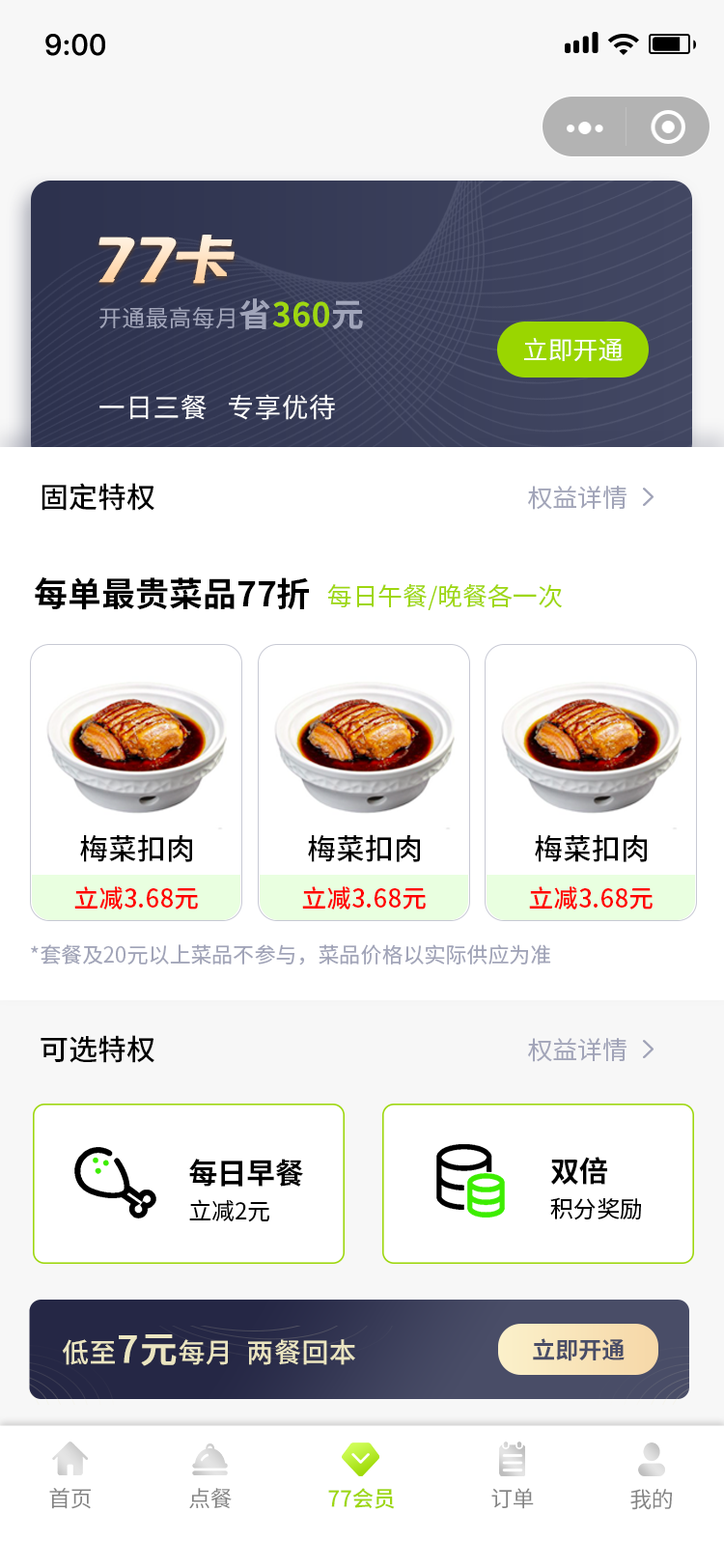
<style>
.page{position:relative;width:724px;height:1568px;background:#ffffff}
.page>*{position:absolute;margin:0}
.t1{font:29px "PingFang-SC-Bold";letter-spacing:0.02em;color:#000000}
.t2{font:59.9px "zihun54hao-xianhei";letter-spacing:-0.02em;font-style:italic}
.t3{font:23.2px "SourceHanSansCN-Regular";letter-spacing:0.02em;color:#a1a5ba}
.t4{font:32.8px "SourceHanSansCN-Bold";letter-spacing:0.02em;color:#a1a5ba}
.t5{font:32.8px "SourceHanSansCN-Bold";letter-spacing:0.02em;color:#9ed710}
.t6{font:25.1px "SourceHanSansCN-Regular";color:#ffffff}
.t7{font:27px "SourceHanSansCN-Regular";letter-spacing:0.02em;color:#ffffff}
.t8{font:29px "SourceHanSansCN-Medium";color:#000000}
.t9{font:25.1px "SourceHanSansCN-Regular";color:#a1a4b8}
.t10{font:33.8px "SourceHanSansCN-Bold";color:#000000}
.t11{font:25.1px "SourceHanSansCN-Regular";color:#9ed710}
.t12{font:25.1px "SourceHanSansCN-Medium";color:#ff0000}
.t13{font:21.2px "SourceHanSansCN-Regular";color:#a1a4b8}
.t14{font:29px "SourceHanSansCN-Bold";color:#000000}
.t15{font:23.2px "SourceHanSansCN-Regular";color:#000000}
.t16{font:27px "SourceHanSansCN-Medium";letter-spacing:0.02em;color:#ebe5c1}
.t17{font:36.7px "SourceHanSansCN-Medium";letter-spacing:0.02em;color:#ebe5c1;font-weight:bold}
.t18{font:23.2px "SourceHanSansCN-Bold";color:#494d67}
.t19{font:22.2px "SourceHanSansCN-Regular";letter-spacing:-0.02em;color:#838383}
.t20{font:22.2px "SourceHanSansCN-Medium";letter-spacing:-0.02em;color:#9ed710}
</style>
<div class="page">
<p class="t1" style="left:45px;top:34px;width:60px;height:22px">9:00</p>
<p class="t2" style="left:98px;top:235px;width:137px;height:49px">77卡</p>
<p class="t3" style="left:99px;top:298px;width:264px;height:32px">开通最高每月<span class="t4">省</span><span class="t5">360</span><span class="t4">元</span></p>
<p class="t6" style="left:524px;top:338px;width:99px;height:23px">立即开通</p>
<p class="t7" style="left:99px;top:394px;width:236px;height:26px">一日三餐   专享优待</p>
<p class="t8" style="left:42px;top:483px;width:112px;height:28px">固定特权</p>
<p class="t9" style="left:528px;top:486px;width:99px;height:24px">权益详情</p>
<p class="t10" style="left:35px;top:577px;width:274px;height:33px">每单最贵菜品77折</p>
<p class="t11" style="left:327px;top:584px;width:235px;height:26px">每日午餐/晚餐各一次</p>
<p class="t8" style="left:80px;top:834px;width:112px;height:28px">梅菜扣肉</p>
<p class="t8" style="left:308px;top:834px;width:112px;height:28px">梅菜扣肉</p>
<p class="t8" style="left:535px;top:834px;width:112px;height:28px">梅菜扣肉</p>
<p class="t12" style="left:74px;top:886px;width:124px;height:24px">立减3.68元</p>
<p class="t12" style="left:302px;top:886px;width:124px;height:24px">立减3.68元</p>
<p class="t12" style="left:529px;top:886px;width:124px;height:24px">立减3.68元</p>
<p class="t13" style="left:31px;top:944px;width:520px;height:22px">*套餐及20元以上菜品不参与，菜品价格以实际供应为准</p>
<p class="t8" style="left:41px;top:1035px;width:113px;height:28px">可选特权</p>
<p class="t9" style="left:528px;top:1038px;width:99px;height:24px">权益详情</p>
<p class="t14" style="left:550px;top:1157px;width:57px;height:28px">双倍</p>
<p class="t14" style="left:189px;top:1159px;width:114px;height:28px">每日早餐</p>
<p class="t15" style="left:189px;top:1199px;width:80px;height:23px">立减2元</p>
<p class="t15" style="left:550px;top:1197px;width:91px;height:23px">积分奖励</p>
<p class="t16" style="left:62px;top:1334px;width:293px;height:32px">低至<span class="t17">7元</span>每月  两餐回本</p>
<p class="t18" style="left:533px;top:1338px;width:92px;height:23px">立即开通</p>
<p class="t19" style="left:49px;top:1488px;width:42px;height:21px">首页</p>
<p class="t19" style="left:189px;top:1488px;width:43px;height:21px">点餐</p>
<p class="t20" style="left:328px;top:1488px;width:67px;height:21px">77会员</p>
<p class="t19" style="left:491px;top:1488px;width:43px;height:21px">订单</p>
<p class="t19" style="left:630px;top:1489px;width:42px;height:21px">我的</p>
</div>
